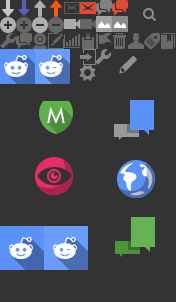
<style>
.page{position:relative;width:176px;height:302px;background:#333333}
.page>*{position:absolute;margin:0}
.t1{font:20px "FuturaLT-Book";color:#ffffff}
</style>
<div class="page">
<p class="t1" style="left:47px;top:107px;width:18px;height:17px">M</p>
</div>
